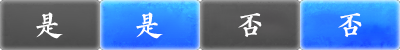
<style>
.page{position:relative;width:400px;height:50px}
.page>*{position:absolute;margin:0}
.t1{font:30px "AaYZQDBTBNon-CommercialUse";letter-spacing:0.4em;color:#ffffff}
</style>
<div class="page">
<p class="t1" style="left:36px;top:12px;width:27px;height:27px">是</p>
<p class="t1" style="left:136px;top:12px;width:27px;height:27px">是</p>
<p class="t1" style="left:238px;top:13px;width:24px;height:24px">否</p>
<p class="t1" style="left:338px;top:13px;width:24px;height:24px">否</p>
</div>
